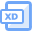
<style>
.page{position:relative;width:32px;height:32px;background:#ffffff}
.page>*{position:absolute;margin:0}
.t1{font:8.3px "Verdana-Bold";color:#6fa6f7}
</style>
<div class="page">
<p class="t1" style="left:4px;top:13px;width:14px;height:7px">XD</p>
</div>
